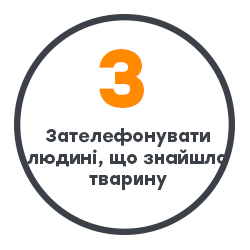
<style>
.page{position:relative;width:250px;height:250px;background:#ffffff}
.page>*{position:absolute;margin:0}
.t1{font:82.1px "Stolzl-Bold";color:#ff8a00}
.t2{font:18px "Stolzl-Bold";color:#3c4148}
</style>
<div class="page">
<p class="t1" style="left:99px;top:49px;width:45px;height:59px">3</p>
<p class="t2" style="left:27px;top:128px;width:201px;height:62px;text-align:center">Зателефонувати<br>людині, що знайшла<br>тварину</p>
</div>
